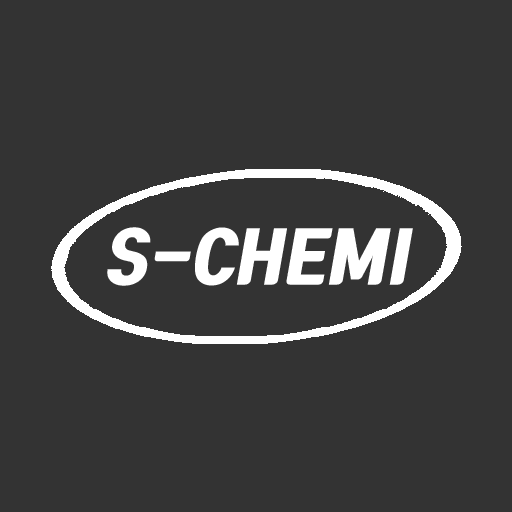
<style>
.page{position:relative;width:512px;height:512px;background:#333333}
.page>*{position:absolute;margin:0}
.t1{font:65px "TmonMonsoriBlack";color:#ffffff;font-style:italic}
</style>
<div class="page">
<p class="t1" style="left:107px;top:227px;width:306px;height:59px">S-CHEMI</p>
</div>
